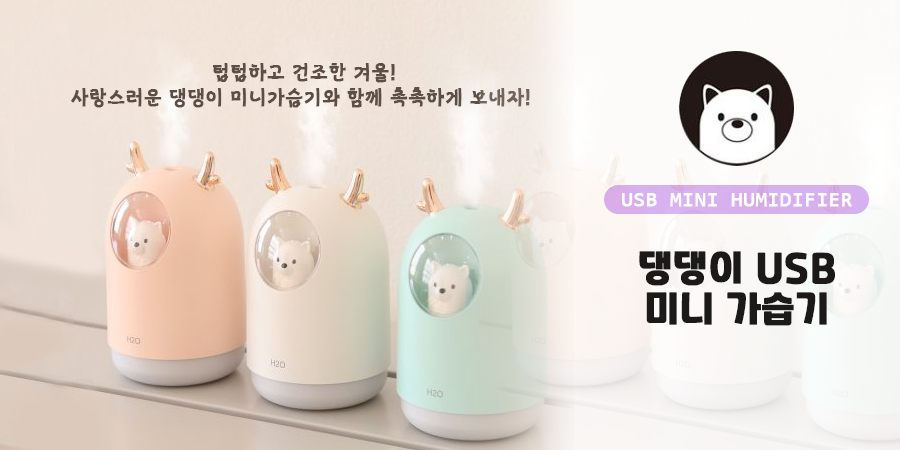
<style>
.page{position:relative;width:900px;height:450px}
.page>*{position:absolute;margin:0}
.t1{font:21.1px "MapoBackpacking";color:#5c4e44;font-weight:bold}
.t2{font:21.1px "Consolas";color:#ffffff;font-weight:bold}
.t3{font:34.4px/20.7px "RecipekoreaM";color:#1b1a19;font-weight:bold}
</style>
<div class="page">
<p class="t1" style="left:71px;top:63px;width:459px;height:45px;text-align:center">텁텁하고 건조한 겨울!<br>사랑스러운 댕댕이 미니가습기와 함께 촉촉하게 보내자!</p>
<p class="t2" style="left:622px;top:193px;width:230px;height:14px">USB MINI HUMIDIFIER</p>
<p class="t3" style="left:639px;top:251px;width:196px;height:75px;text-align:center">댕댕이 USB<br><br>미니 가습기</p>
</div>
